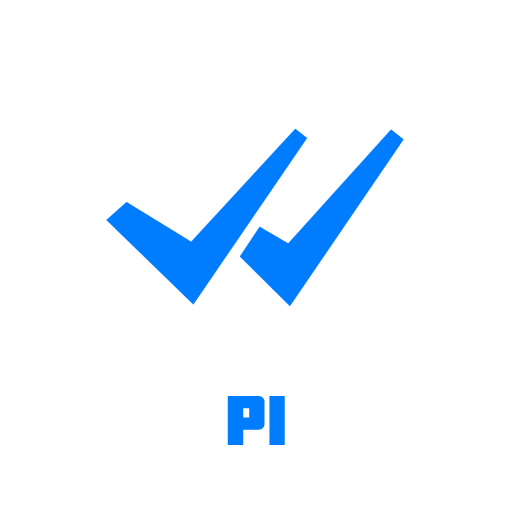
<style>
.page{position:relative;width:512px;height:512px;background:#ffffff}
.page>*{position:absolute;margin:0}
.t1{font:70px "Molot";color:#007cff}
</style>
<div class="page">
<p class="t1" style="left:227px;top:396px;width:58px;height:49px">PI</p>
</div>
